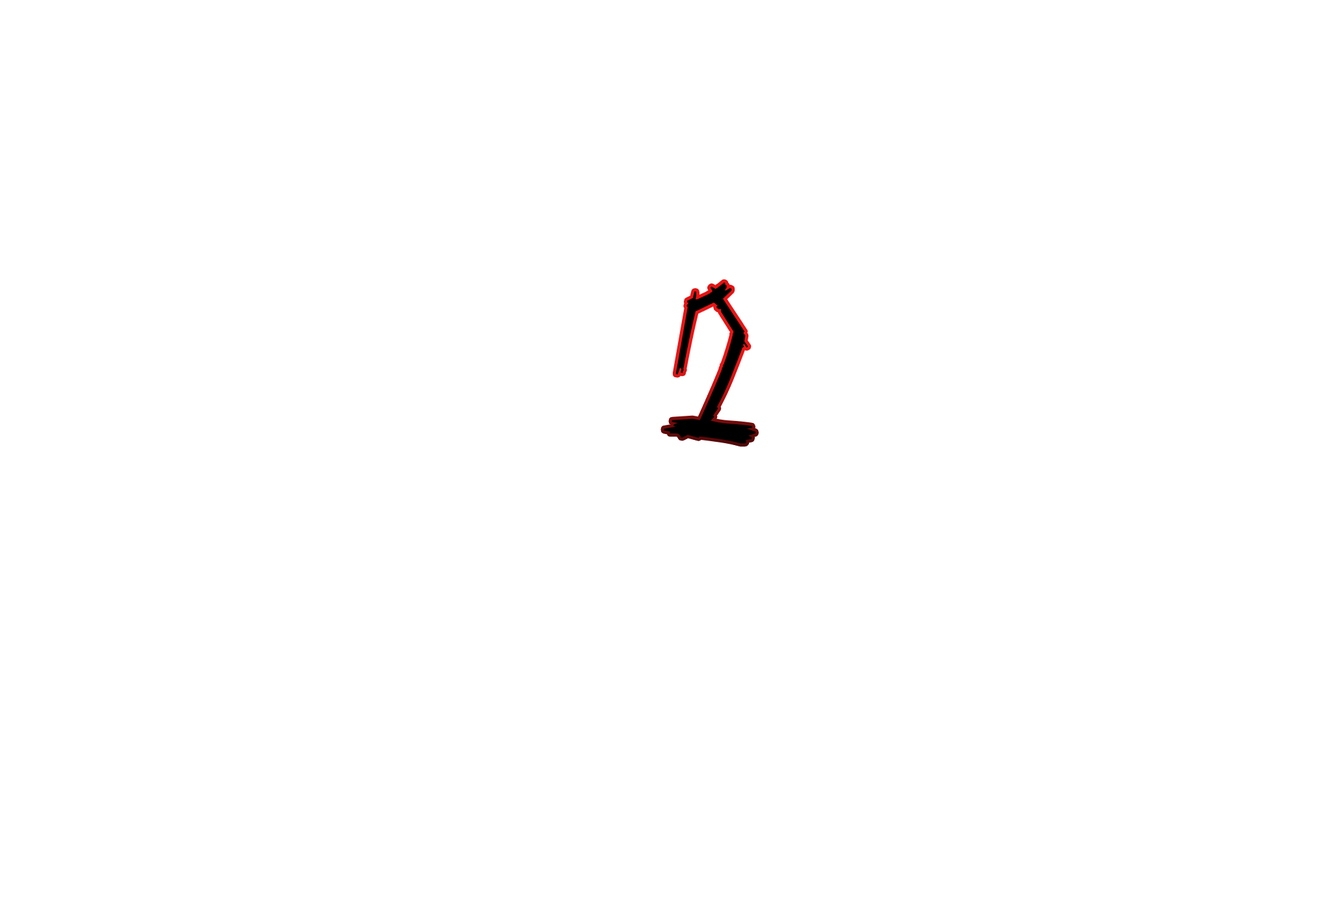
<style>
.page{position:relative;width:1328px;height:898px;background:#ffffff}
.page>*{position:absolute;margin:0}
.t1{font:199.3px "onryou";color:#000000;font-weight:bold}
</style>
<div class="page">
<p class="t1" style="left:664px;top:282px;width:92px;height:162px">2</p>
</div>
